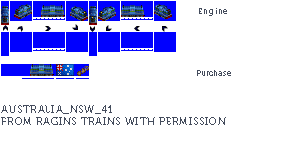
<style>
.page{position:relative;width:300px;height:159px;background:#ffffff}
.page>*{position:absolute;margin:0}
.t1{font:8px "Museo700-Regular";letter-spacing:0.075em;color:#444c5c}
.t2{font:8px "Museo700-Regular";color:#444c5c}
.t3{font:10px "Museo700-Regular";letter-spacing:0.075em;color:#444c5c;text-transform:uppercase}
</style>
<div class="page">
<p class="t1" style="left:199px;top:8px;width:28px;height:8px">Engine</p>
<p class="t2" style="left:197px;top:70px;width:34px;height:6px">Purchase</p>
<p class="t3" style="left:1px;top:105px;width:225px;height:20px">Australia_NSW_41<br>from ragins trains with permission</p>
</div>
